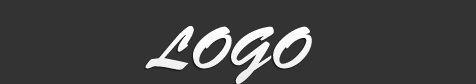
<style>
.page{position:relative;width:476px;height:84px;background:#333333}
.page>*{position:absolute;margin:0}
.t1{font:60px "BrushScriptStd";color:#ffffff;text-transform:uppercase}
</style>
<div class="page">
<p class="t1" style="left:145px;top:26px;width:167px;height:58px">Logo</p>
</div>
